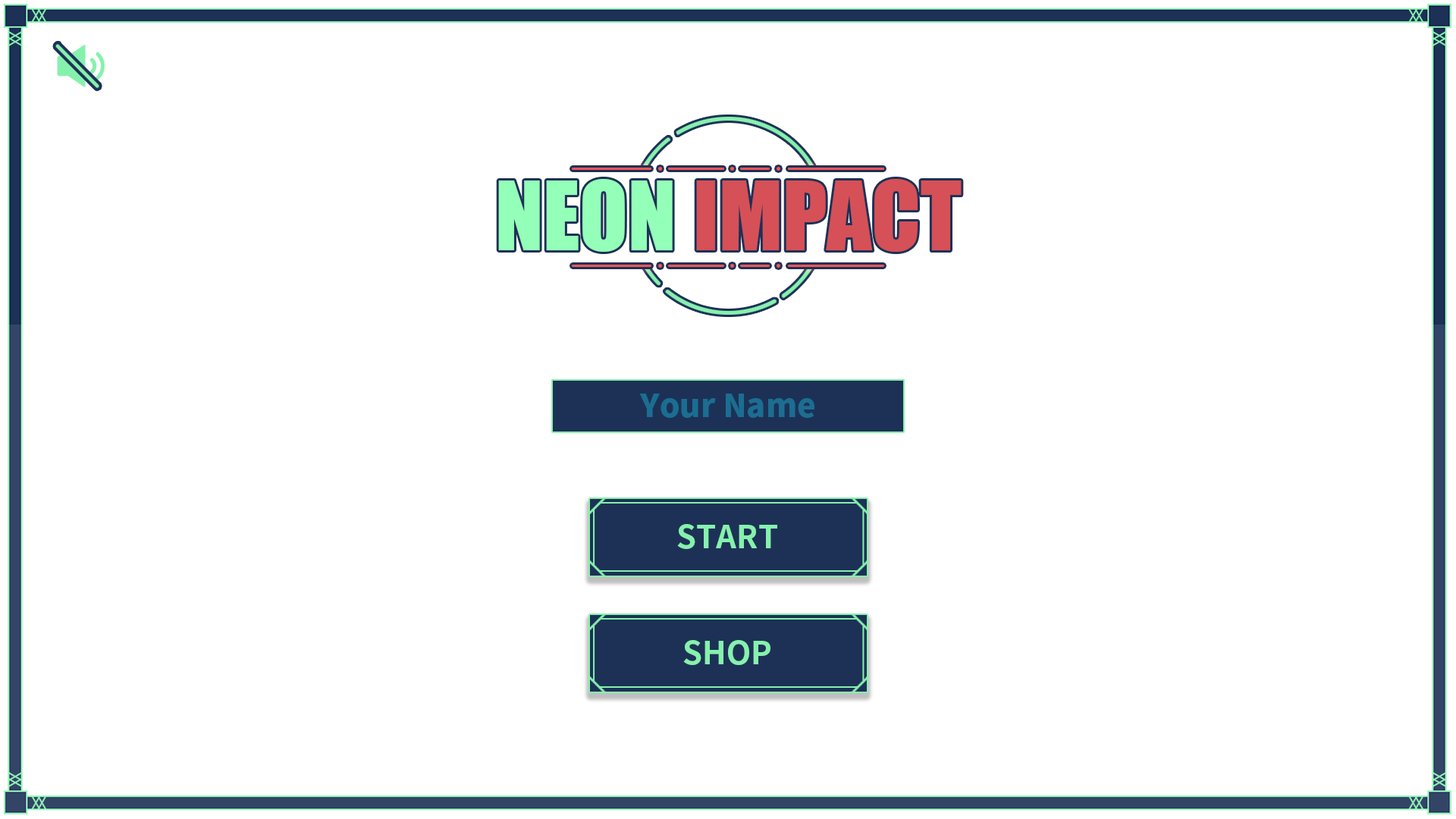
<style>
.page{position:relative;width:1456px;height:819px;background:#ffffff}
.page>*{position:absolute;margin:0}
.t1{font:88.5px "Impact";color:#94ffb9}
.t2{font:88.5px "Impact";color:#d65057}
.t3{font:31.6px "NotoSansCJKtc-Black";color:#1b6e91}
.t4{font:31.6px "NotoSansCJKtc-Bold";color:#86f1ad}
</style>
<div class="page">
<p class="t1" style="left:498px;top:179px;width:175px;height:73px">NEON</p>
<p class="t2" style="left:696px;top:179px;width:266px;height:73px">IMPACT</p>
<p class="t3" style="left:639px;top:394px;width:175px;height:24px">Your Name</p>
<p class="t4" style="left:677px;top:524px;width:100px;height:25px">START</p>
<p class="t4" style="left:683px;top:640px;width:87px;height:25px">SHOP</p>
</div>
